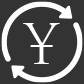
<style>
.page{position:relative;width:84px;height:84px;background:#333333}
.page>*{position:absolute;margin:0}
.t1{font:53.6px "TrajanPro-Regular";letter-spacing:0.2em;color:#fffefe}
</style>
<div class="page">
<p class="t1" style="left:23px;top:23px;width:37px;height:41px">¥</p>
</div>
